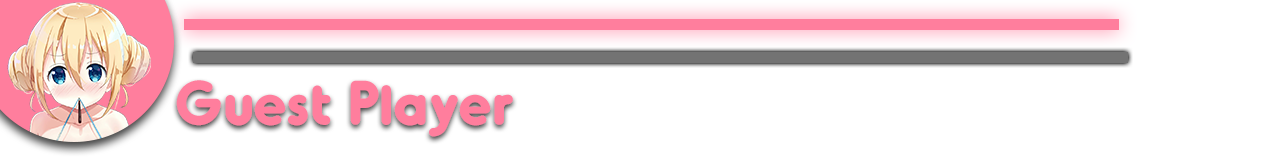
<style>
.page{position:relative;width:1280px;height:160px;background:#ffffff}
.page>*{position:absolute;margin:0}
.t1{font:60px "Oduda-Bold";color:#ff7e9d}
</style>
<div class="page">
<p class="t1" style="left:176px;top:80px;width:337px;height:57px">Guest Player</p>
</div>
